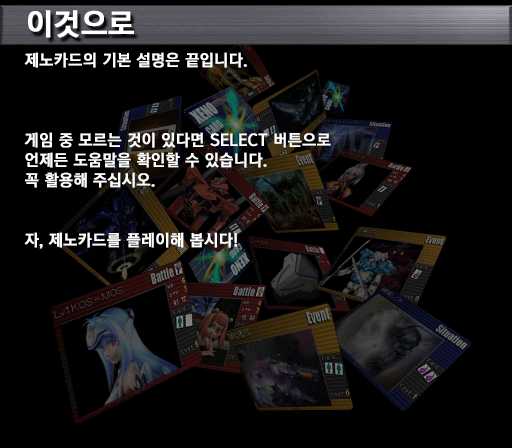
<style>
.page{position:relative;width:512px;height:448px;background:#000000}
.page>*{position:absolute;margin:0}
.t1{font:30px "KoreanGD15-R";color:#ffffff;font-weight:bold}
.t2{font:16px/20px "KoreanGD15-R";color:#ffffff;font-weight:bold}
</style>
<div class="page">
<p class="t1" style="left:28px;top:10px;width:106px;height:28px">이것으로</p>
<p class="t2" style="left:24px;top:52px;width:307px;height:197px">제노카드의 기본 설명은 끝입니다.<br><br><br><br>게임 중 모르는 것이 있다면 SELECT 버튼으로<br>언제든 도움말을 확인할 수 있습니다.<br>꼭 활용해 주십시오.<br><br><br>자, 제노카드를 플레이해 봅시다!</p>
</div>
